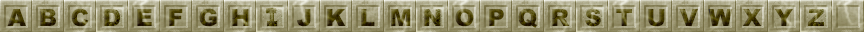
<style>
.page{position:relative;width:864px;height:32px}
.page>*{position:absolute;margin:0}
.t1{font:23.8px "Arial-Black";letter-spacing:-0.1em}
.t2{font:14.3px "Arial-Black";letter-spacing:-0.1em;scale:1.67 1}
</style>
<div class="page">
<p class="t1" style="left:7px;top:9px;width:19px;height:17px">A</p>
<p class="t1" style="left:40px;top:9px;width:16px;height:17px">B</p>
<p class="t1" style="left:71px;top:8px;width:18px;height:19px">C</p>
<p class="t1" style="left:104px;top:9px;width:16px;height:17px">D</p>
<p class="t1" style="left:137px;top:9px;width:15px;height:17px">E</p>
<p class="t1" style="left:169px;top:9px;width:14px;height:17px">F</p>
<p class="t1" style="left:199px;top:8px;width:18px;height:19px">G</p>
<p class="t1" style="left:232px;top:9px;width:17px;height:17px">H</p>
<p class="t2" style="left:266px;top:8px;width:11px;height:6px;rotate:90deg">I</p>
<p class="t1" style="left:297px;top:9px;width:14px;height:18px">J</p>
<p class="t1" style="left:327px;top:9px;width:19px;height:17px">K</p>
<p class="t1" style="left:361px;top:9px;width:14px;height:17px">L</p>
<p class="t1" style="left:391px;top:9px;width:20px;height:17px">M</p>
<p class="t1" style="left:424px;top:9px;width:17px;height:17px">N</p>
<p class="t1" style="left:455px;top:8px;width:19px;height:19px">O</p>
<p class="t1" style="left:489px;top:9px;width:15px;height:17px">P</p>
<p class="t1" style="left:518px;top:8px;width:19px;height:20px">Q</p>
<p class="t1" style="left:552px;top:9px;width:18px;height:17px">R</p>
<p class="t1" style="left:585px;top:8px;width:16px;height:19px">S</p>
<p class="t1" style="left:616px;top:9px;width:16px;height:17px">T</p>
<p class="t1" style="left:648px;top:9px;width:17px;height:18px">U</p>
<p class="t1" style="left:679px;top:9px;width:19px;height:17px">V</p>
<p class="t1" style="left:708px;top:9px;width:25px;height:17px">W</p>
<p class="t1" style="left:742px;top:9px;width:20px;height:17px">X</p>
<p class="t1" style="left:774px;top:9px;width:19px;height:17px">Y</p>
<p class="t1" style="left:808px;top:9px;width:16px;height:17px">Z</p>
<p class="t2" style="left:267px;top:21px;width:11px;height:6px;rotate:90deg">I</p>
</div>
